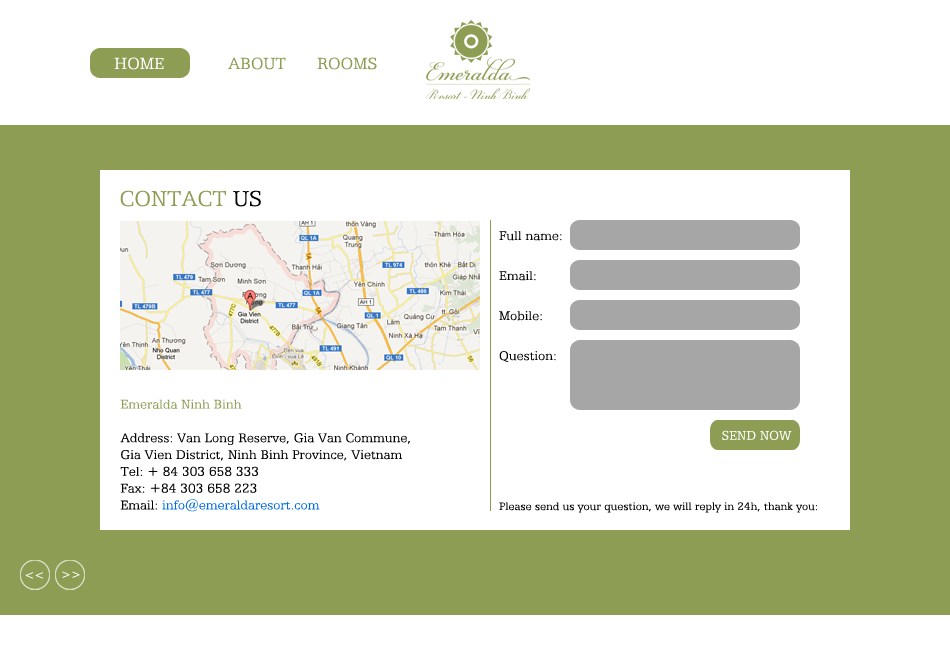
<style>
.page{position:relative;width:950px;height:650px;background:#ffffff}
.page>*{position:absolute;margin:0}
.t1{font:18px "UVNAiCapNhe";color:#ffffff}
.t2{font:18px "UVNAiCapNhe";color:#8d9d54}
.t3{font:24px "UVNAiCapNhe";color:#8d9d54}
.t4{font:24px "UVNAiCapNhe";color:#000000}
.t5{font:14px "UVNAiCapNhe";color:#000000}
.t6{font:14px "UVNAiCapNhe";color:#8d9d54}
.t7{font:14px "UVNAiCapNhe";color:#006be4}
.t8{font:14px "UVNAiCapNhe";color:#ffffff}
.t9{font:12px "UVNAiCapNhe";color:#000000}
.t10{font:12px "UVNAiCapNhe";color:#ffffff}
</style>
<div class="page">
<p class="t1" style="left:114px;top:57px;width:50px;height:13px">HOME</p>
<p class="t2" style="left:228px;top:57px;width:58px;height:13px">ABOUT</p>
<p class="t2" style="left:317px;top:57px;width:60px;height:13px">ROOMS</p>
<p class="t3" style="left:120px;top:190px;width:141px;height:17px">CONTACT <span class="t4">US</span></p>
<p class="t5" style="left:499px;top:231px;width:63px;height:10px">Full name:</p>
<p class="t5" style="left:499px;top:271px;width:37px;height:10px">Email:</p>
<p class="t5" style="left:499px;top:311px;width:43px;height:10px">Mobile:</p>
<p class="t5" style="left:499px;top:351px;width:57px;height:11px">Question:</p>
<p class="t5" style="left:120px;top:399px;width:290px;height:113px"><span class="t6">Emeralda Ninh Binh<br></span><br>Address: Van Long Reserve, Gia Van Commune,<br>Gia Vien District, Ninh Binh Province, Vietnam<br>Tel: + 84 303 658 333<br>Fax: +84 303 658 223<br>Email: <span class="t7">info@emeraldaresort.com</span></p>
<p class="t8" style="left:722px;top:430px;width:70px;height:10px">SEND NOW</p>
<p class="t9" style="left:499px;top:502px;width:318px;height:11px">Please send us your question, we will reply in 24h, thank you:</p>
<p class="t10" style="left:25px;top:572px;width:18px;height:7px">&lt;&lt;</p>
<p class="t10" style="left:62px;top:571px;width:18px;height:7px">&gt;&gt;</p>
</div>
